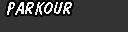
<style>
.page{position:relative;width:128px;height:32px;background:#333333}
.page>*{position:absolute;margin:0}
.t1{font:18px "DomDiagonalBT-Regular";letter-spacing:0.05em;color:#fbfbfb}
</style>
<div class="page">
<p class="t1" style="left:7px;top:2px;width:65px;height:13px">PARKOUR</p>
</div>
